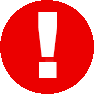
<style>
.page{position:relative;width:94px;height:94px;background:#eb0000}
.page>*{position:absolute;margin:0}
.t1{font:92px "Arial-Black";letter-spacing:0.01em;color:#ffffff;scale:0.96 1}
</style>
<div class="page">
<p class="t1" style="left:38px;top:12px;width:19px;height:66px">!</p>
</div>
